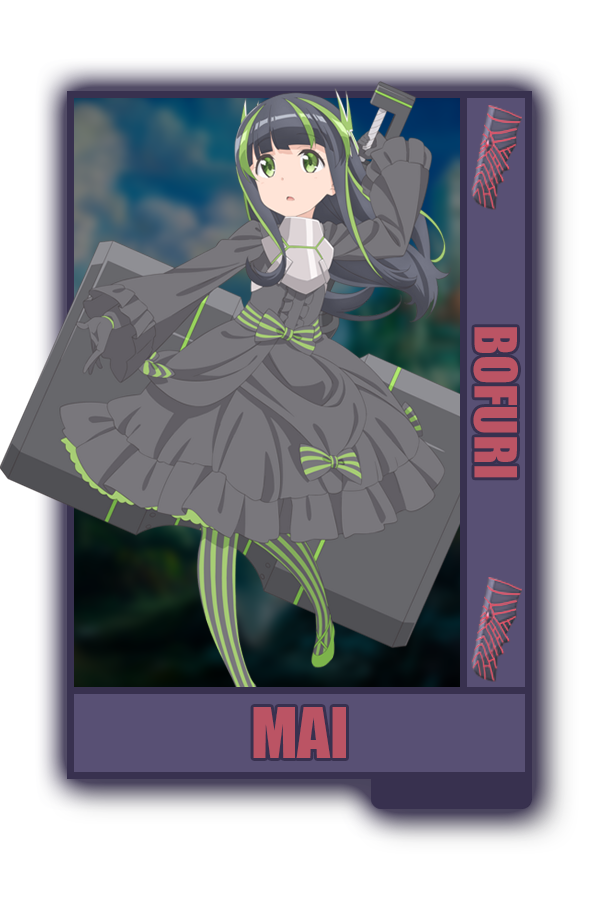
<style>
.page{position:relative;width:600px;height:900px;background:#ffffff}
.page>*{position:absolute;margin:0}
.t1{font:53.6px "Impact";color:#bb5464}
.t2{font:64.6px "Impact";color:#bb5464}
</style>
<div class="page">
<p class="t1" style="left:473px;top:327px;width:45px;height:151px;rotate:90deg">BOFURI</p>
<p class="t2" style="left:253px;top:707px;width:93px;height:51px">MAI</p>
</div>
